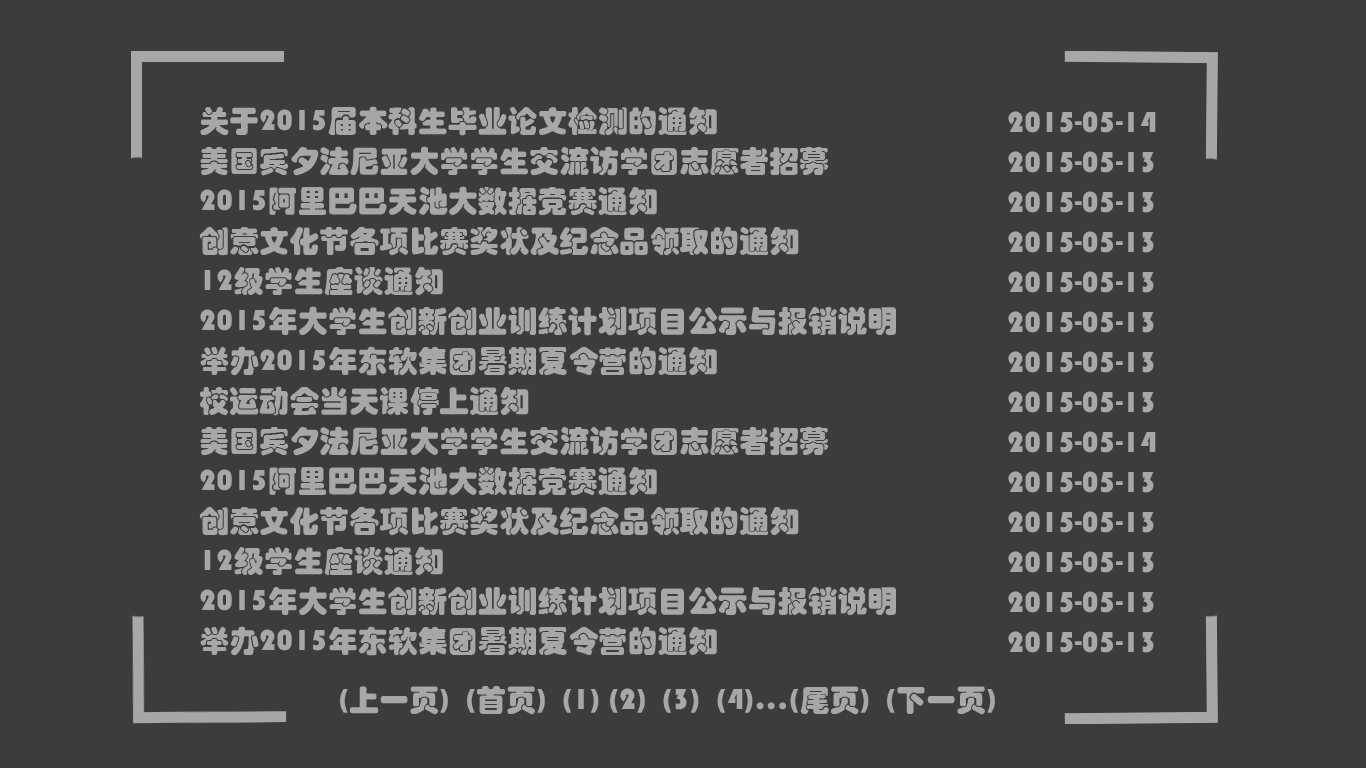
<style>
.page{position:relative;width:1366px;height:768px;background:#3d3c3c}
.page>*{position:absolute;margin:0}
.t1{font:30px/40px "STHupo";color:#a9a6a6}
.t2{font:30px "STHupo";color:#a9a6a6}
</style>
<div class="page">
<p class="t1" style="left:199px;top:106px;width:697px;height:550px">关于2015届本科生毕业论文检测的通知                                    <br>美国宾夕法尼亚大学学生交流访学团志愿者招募                    <br>2015阿里巴巴天池大数据竞赛通知                                        <br>创意文化节各项比赛奖状及纪念品领取的通知                        <br>12级学生座谈通知                                                                        <br>2015年大学生创新创业训练计划项目公示与报销说明           <br>举办2015年东软集团暑期夏令营的通知                                    <br>校运动会当天课停上通知<br>美国宾夕法尼亚大学学生交流访学团志愿者招募                    <br>2015阿里巴巴天池大数据竞赛通知                                        <br>创意文化节各项比赛奖状及纪念品领取的通知                        <br>12级学生座谈通知                                                                        <br>2015年大学生创新创业训练计划项目公示与报销说明           <br>举办2015年东软集团暑期夏令营的通知</p>
<p class="t1" style="left:1008px;top:111px;width:148px;height:542px">2015-05-14<br>2015-05-13<br>2015-05-13<br>2015-05-13<br>2015-05-13<br>2015-05-13<br>2015-05-13<br>2015-05-13<br>2015-05-14<br>2015-05-13<br>2015-05-13<br>2015-05-13<br>2015-05-13<br>2015-05-13<br><br>2015-05-13</p>
<p class="t2" style="left:340px;top:686px;width:655px;height:29px">(上一页)  (首页)  (1) (2)  (3)  (4)...(尾页)  (下一页)</p>
</div>
